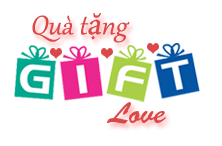
<style>
.page{position:relative;width:222px;height:146px;background:#ffffff}
.page>*{position:absolute;margin:0}
.t1{font:32.5px "Gabriola";letter-spacing:0.005em;color:#dc4848;font-style:italic}
.t2{font:32.5px "MinionPro-Regular";letter-spacing:0.005em;color:#dc4848;font-style:italic}
.t3{font:30.3px "BrushScriptStd";color:#dc4848}
</style>
<div class="page">
<p class="t1" style="left:32px;top:13px;width:98px;height:30px">Quà t<span class="t2">ặ</span>ng</p>
<p class="t3" style="left:106px;top:102px;width:60px;height:22px">Love</p>
</div>
